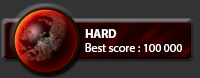
<style>
.page{position:relative;width:200px;height:78px;background:#333333}
.page>*{position:absolute;margin:0}
.t1{font:12px "MyriadPro-Bold";color:#ffffff}
.t2{font:12px "MyriadPro-Regular";color:#ffffff}
</style>
<div class="page">
<p class="t1" style="left:85px;top:29px;width:32px;height:9px">HARD</p>
<p class="t2" style="left:85px;top:43px;width:97px;height:9px">Best score : 100 000</p>
</div>
